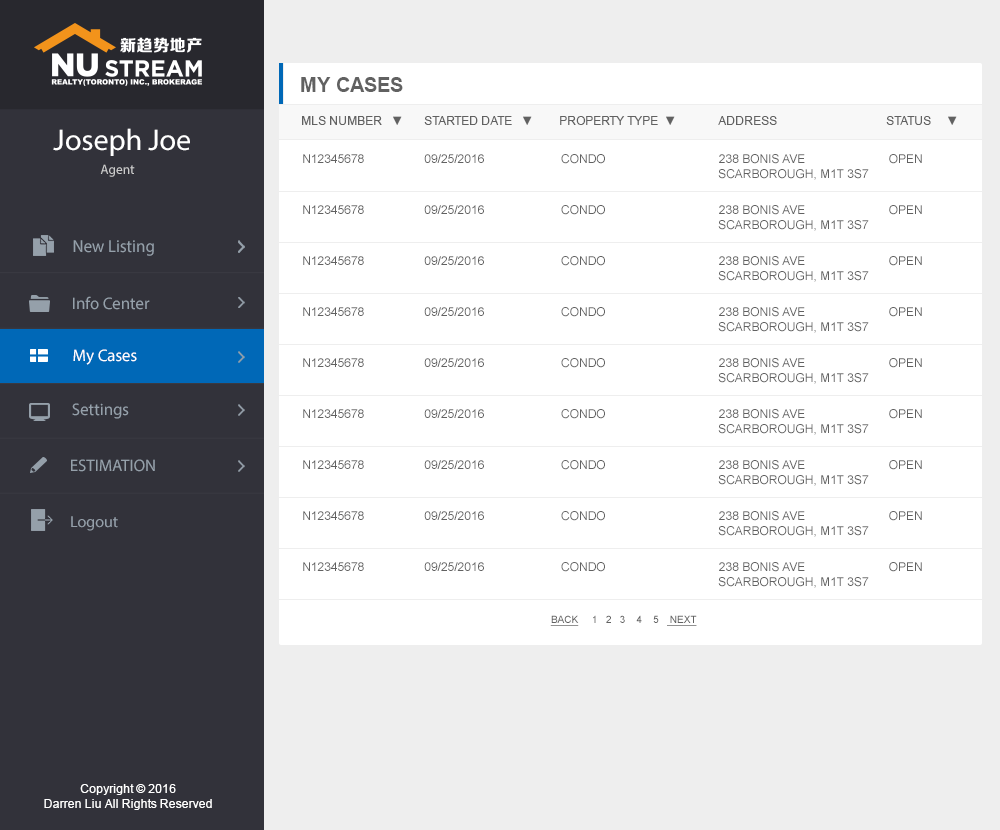
<style>
.page{position:relative;width:1000px;height:830px;background:#ffffff}
.page>*{position:absolute;margin:0}
.t1{font:20px "Arial-BoldMT";color:#616161}
.t2{font:12px "ArialMT";color:#616161;text-transform:uppercase}
.t3{font:30px "MyriadPro-Regular";color:#ffffff}
.t4{font:13.4px "MyriadPro-Regular";color:#cccccc}
.t5{font:17.6px "MyriadPro-Regular";color:#95a0aa;scale:0.96 1}
.t6{font:16.8px "MyriadPro-Regular";color:#95a0aa}
.t7{font:16.8px "MyriadPro-Regular";color:#ffffff}
.t8{font:16px "MyriadPro-Regular";color:#95a0aa}
.t9{font:10px "ArialMT";color:#616161;text-transform:uppercase}
.t10{font:10px "ArialMT";color:#616161;text-transform:uppercase;text-decoration:underline}
.t11{font:12px "ArialMT";color:#ffffff}
</style>
<div class="page">
<p class="t1" style="left:301px;top:77px;width:102px;height:15px">MY CASES</p>
<p class="t2" style="left:302px;top:116px;width:655px;height:9px">MLS Number   ▼       Started date   ▼         property type  ▼             address                      status     ▼</p>
<p class="t3" style="left:53px;top:128px;width:137px;height:28px">Joseph Joe</p>
<p class="t2" style="left:303px;top:154px;width:619px;height:26px">N12345678                  09/25/2016                       CONDO                                  238 Bonis AVE                         open<br>                   SCARBOROUGH, m1t 3s7</p>
<p class="t4" style="left:100px;top:164px;width:35px;height:13px">Agent</p>
<p class="t2" style="left:303px;top:205px;width:619px;height:26px">N12345678                  09/25/2016                       CONDO                                  238 Bonis AVE                         open<br>                   SCARBOROUGH, m1t 3s7</p>
<p class="t5" style="left:73px;top:240px;width:81px;height:16px">New Listing</p>
<p class="t2" style="left:303px;top:256px;width:619px;height:26px">N12345678                  09/25/2016                       CONDO                                  238 Bonis AVE                         open<br>                   SCARBOROUGH, m1t 3s7</p>
<p class="t6" style="left:73px;top:296px;width:77px;height:14px">Info Center</p>
<p class="t2" style="left:303px;top:307px;width:619px;height:26px">N12345678                  09/25/2016                       CONDO                                  238 Bonis AVE                         open<br>                   SCARBOROUGH, m1t 3s7</p>
<p class="t7" style="left:73px;top:349px;width:64px;height:16px">My Cases</p>
<p class="t2" style="left:303px;top:358px;width:619px;height:26px">N12345678                  09/25/2016                       CONDO                                  238 Bonis AVE                         open<br>                   SCARBOROUGH, m1t 3s7</p>
<p class="t6" style="left:72px;top:403px;width:57px;height:16px">Settings</p>
<p class="t2" style="left:303px;top:409px;width:619px;height:26px">N12345678                  09/25/2016                       CONDO                                  238 Bonis AVE                         open<br>                   SCARBOROUGH, m1t 3s7</p>
<p class="t6" style="left:71px;top:459px;width:84px;height:13px">ESTIMATION</p>
<p class="t2" style="left:303px;top:460px;width:619px;height:26px">N12345678                  09/25/2016                       CONDO                                  238 Bonis AVE                         open<br>                   SCARBOROUGH, m1t 3s7</p>
<p class="t8" style="left:71px;top:516px;width:47px;height:15px">Logout</p>
<p class="t2" style="left:303px;top:511px;width:619px;height:26px">N12345678                  09/25/2016                       CONDO                                  238 Bonis AVE                         open<br>                   SCARBOROUGH, m1t 3s7</p>
<p class="t2" style="left:303px;top:562px;width:619px;height:26px">N12345678                  09/25/2016                       CONDO                                  238 Bonis AVE                         open<br>                   SCARBOROUGH, m1t 3s7</p>
<p class="t9" style="left:550px;top:615px;width:147px;height:11px"><span class="t10">back</span>     1   2   3    4    5   <span class="t10"> next</span></p>
<p class="t11" style="left:44px;top:784px;width:168px;height:26px;text-align:center">Copyright © 2016<br>Darren Liu All Rights Reserved</p>
</div>
